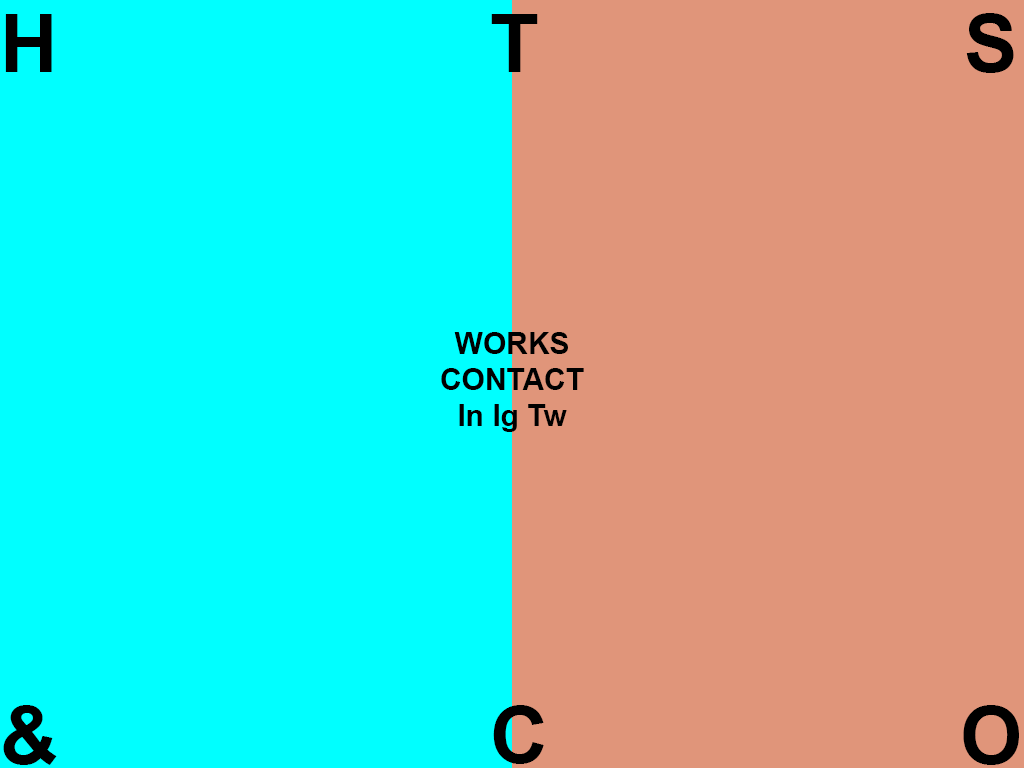
<style>
.page{position:relative;width:1024px;height:768px;background:#00ffff}
.page>*{position:absolute;margin:0}
.t1{font:80px "Arial-BoldMT";color:#000000}
.t2{font:30px "Arial-BoldMT";color:#000000}
</style>
<div class="page">
<p class="t1" style="left:5px;top:13px;width:1009px;height:60px">H             T              S</p>
<p class="t2" style="left:441px;top:332px;width:143px;height:100px;text-align:center">WORKS<br>CONTACT<br>In Ig Tw</p>
<p class="t1" style="left:3px;top:705px;width:1016px;height:60px">&amp;             C            O</p>
</div>
